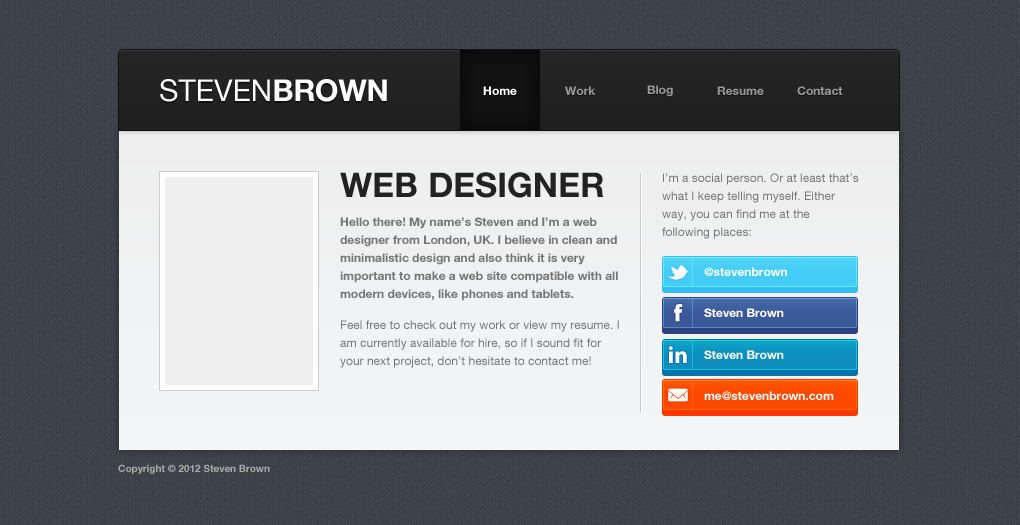
<style>
.page{position:relative;width:1020px;height:525px}
.page>*{position:absolute;margin:0}
.t1{font:30px "HelveticaNeueLTCom-Roman";color:#ffffff}
.t2{font:30px "HelveticaNeueLTCom-Bd";color:#ffffff}
.t3{font:12px "HelveticaNeueLTCom-Bd";color:#ffffff}
.t4{font:12px "HelveticaNeueLTCom-Bd";color:#999999}
.t5{font:34px "HelveticaNeueLTCom-Bd";color:#222222}
.t6{font:12px/18px "HelveticaNeueLTCom-Roman";color:#777777}
.t7{font:12px/18px "HelveticaNeueLTCom-Bd";color:#777777}
.t8{font:24px "MyriadPro-Bold";color:#ffffff}
.t9{font:10px "HelveticaNeueLTCom-Bd";color:#aaaaaa}
</style>
<div class="page">
<p class="t1" style="left:160px;top:79px;width:227px;height:23px">STEVEN<span class="t2">BROWN</span></p>
<p class="t3" style="left:483px;top:86px;width:34px;height:9px">Home</p>
<p class="t4" style="left:565px;top:86px;width:31px;height:9px">Work</p>
<p class="t4" style="left:647px;top:85px;width:26px;height:12px">Blog</p>
<p class="t4" style="left:717px;top:86px;width:47px;height:9px">Resume</p>
<p class="t4" style="left:797px;top:86px;width:46px;height:9px">Contact</p>
<p class="t5" style="left:340px;top:172px;width:264px;height:26px">WEB DESIGNER</p>
<p class="t6" style="left:662px;top:173px;width:197px;height:66px">I’m a social person. Or at least that’s what I keep telling myself. Either way, you can find me at the following places:</p>
<p class="t7" style="left:340px;top:217px;width:278px;height:84px">Hello there! My name’s Steven and I’m a web designer from London, UK. I believe in clean and minimalistic design and also think it is very important to make a web site compatible with all modern devices, like phones and tablets.</p>
<p class="t3" style="left:704px;top:267px;width:83px;height:9px">@stevenbrown</p>
<p class="t3" style="left:704px;top:308px;width:80px;height:9px">Steven Brown</p>
<p class="t6" style="left:340px;top:320px;width:279px;height:48px">Feel free to check out my work or view my resume. I am currently available for hire, so if I sound fit for your next project, don’t hesitate to contact me!</p>
<p class="t8" style="left:669px;top:346px;width:18px;height:17px">in</p>
<p class="t3" style="left:704px;top:350px;width:80px;height:9px">Steven Brown</p>
<p class="t3" style="left:704px;top:391px;width:130px;height:9px">me@stevenbrown.com</p>
<p class="t9" style="left:118px;top:464px;width:152px;height:10px">Copyright © 2012 Steven Brown</p>
</div>
